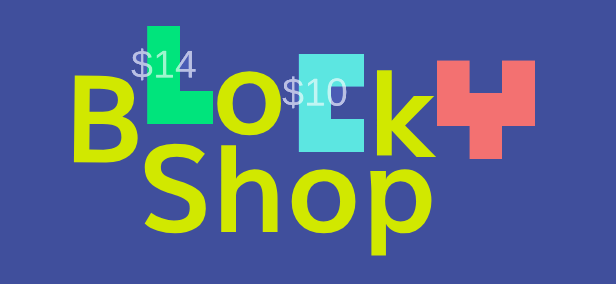
<style>
.page{position:relative;width:616px;height:284px;background:#404f9c}
.page>*{position:absolute;margin:0}
.t1{font:122px "Muli-Bold";color:#d1e800}
</style>
<div class="page">
<p class="t1" style="left:73px;top:75px;width:65px;height:88px;rotate:1deg">B</p>
<p class="t1" style="left:217px;top:71px;width:65px;height:65px">o</p>
<p class="t1" style="left:376px;top:70px;width:61px;height:87px">k</p>
<p class="t1" style="left:144px;top:143px;width:288px;height:113px">Shop</p>
</div>
